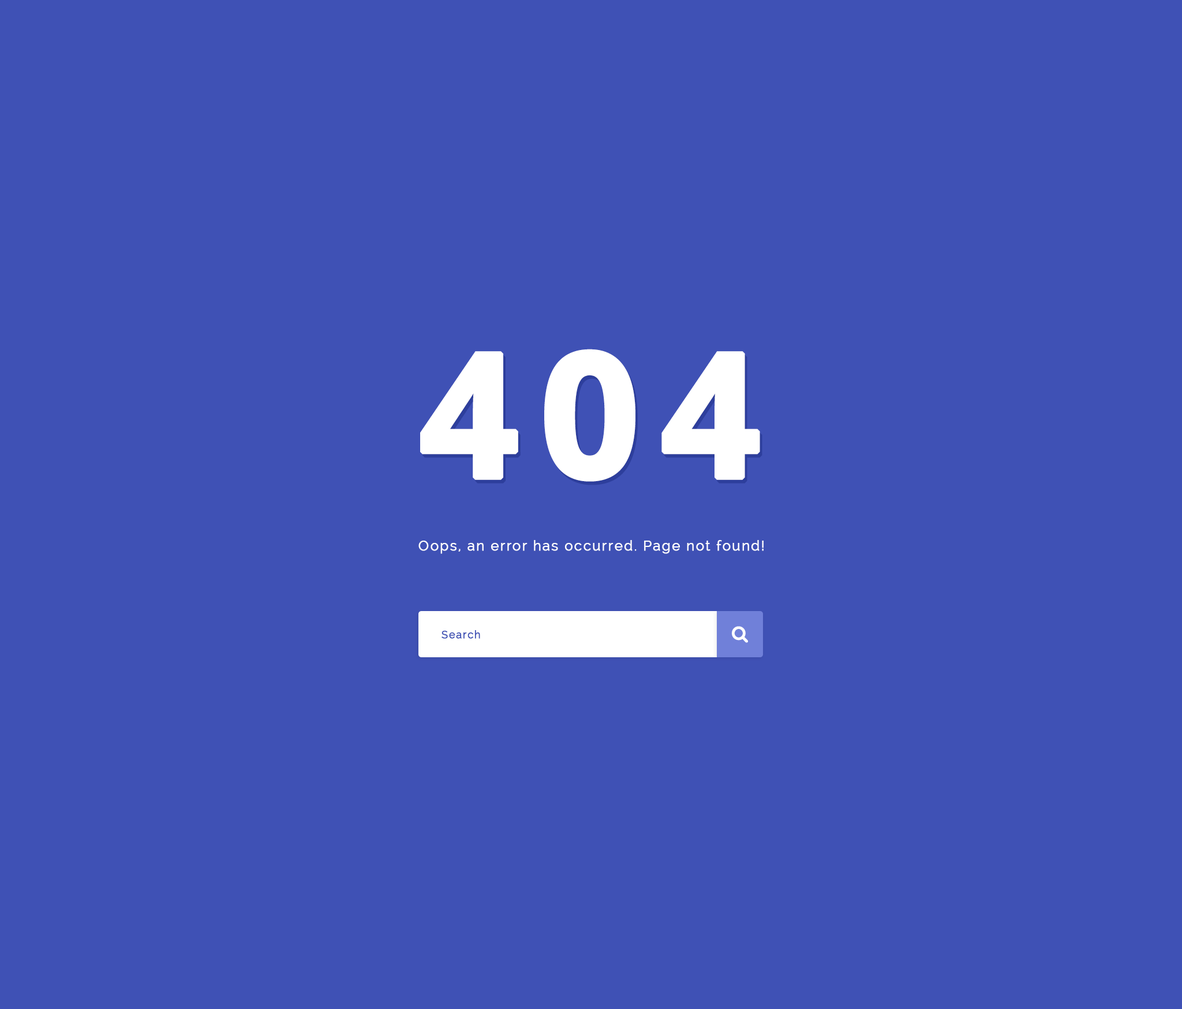
<style>
.page{position:relative;width:1182px;height:1009px;background:#3f51b5}
.page>*{position:absolute;margin:0}
.t1{font:173.2px "OpenSans-Bold";letter-spacing:0.1em;color:#ffffff;font-weight:bold}
.t2{font:13.9px "Raleway";letter-spacing:0.075em;color:#ffffff;font-weight:bold}
.t3{font:10.4px "Raleway";letter-spacing:0.075em;color:#3f51b5;font-weight:bold}
</style>
<div class="page">
<p class="t1" style="left:420px;top:349px;width:340px;height:132px">404</p>
<p class="t1" style="left:423px;top:352px;width:340px;height:133px">404</p>
<p class="t2" style="left:419px;top:540px;width:345px;height:14px">Oops, an error has occurred. Page not found!</p>
<p class="t3" style="left:442px;top:630px;width:38px;height:8px">Search</p>
</div>
